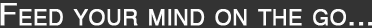
<style>
.page{position:relative;width:372px;height:28px;background:#333333}
.page>*{position:absolute;margin:0}
.t1{font:53px "Helvetica";color:#fcfcfc;font-variant:small-caps;font-weight:bold}
</style>
<div class="page">
<p class="t1" style="left:0px;top:3px;width:373px;height:23px">Feed your mind on the go...</p>
</div>
